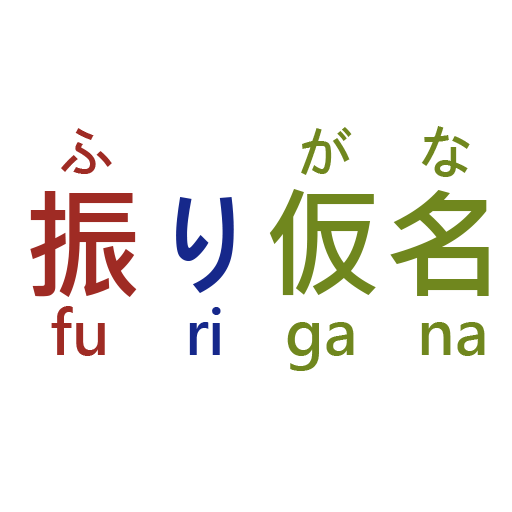
<style>
.page{position:relative;width:512px;height:512px;background:#ffffff}
.page>*{position:absolute;margin:0}
.t1{font:60px "MicrosoftJhengHeiBold";color:#70871e}
.t2{font:60px "MicrosoftJhengHeiBold";color:#9f2b24}
.t3{font:120px "MicrosoftJhengHeiBold";color:#70871e}
.t4{font:120px "MicrosoftJhengHeiBold";color:#9f2b24}
.t5{font:120px "MicrosoftJhengHeiBold";color:#16288b}
.t6{font:60px "MicrosoftJhengHeiBold";color:#16288b}
</style>
<div class="page">
<p class="t1" style="left:61px;top:126px;width:409px;height:51px"><span class="t2">ふ　　　</span>が　な</p>
<p class="t3" style="left:30px;top:189px;width:459px;height:108px"><span class="t4">振</span><span class="t5">り</span>仮名</p>
<p class="t1" style="left:51px;top:306px;width:434px;height:65px"><span class="t2">fu</span><span class="t6">     ri    </span>ga    na</p>
</div>
